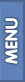
<style>
.page{position:relative;width:25px;height:82px;background:#5f83b9}
.page>*{position:absolute;margin:0}
.t1{font:17.1px "VAGRounded-Black";color:#ffffff;text-transform:uppercase}
</style>
<div class="page">
<p class="t1" style="left:5px;top:18px;width:13px;height:46px;rotate:-90deg">Menu</p>
</div>
